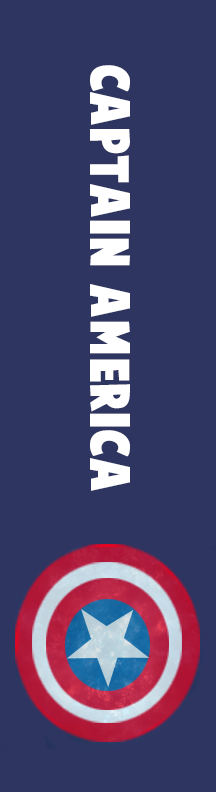
<style>
.page{position:relative;width:216px;height:792px;background:#2e3561}
.page>*{position:absolute;margin:0}
.t1{font:50px "CartoonistKooky";color:#ffffff}
</style>
<div class="page">
<p class="t1" style="left:90px;top:65px;width:40px;height:426px;rotate:90deg">Captain America</p>
</div>
